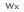
<style>
.page{position:relative;width:24px;height:12px;background:#ffffff}
.page>*{position:absolute;margin:0}
.t1{font:9px "AmiraParadiso";letter-spacing:0.05em;color:#646464}
</style>
<div class="page">
<p class="t1" style="left:5px;top:3px;width:14px;height:6px">Wx</p>
</div>
